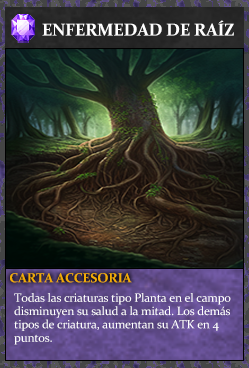
<style>
.page{position:relative;width:249px;height:368px}
.page>*{position:absolute;margin:0}
.t1{font:17.3px "Constantia-Bold";letter-spacing:-0.02em;color:#ffffff}
.t2{font:13.3px "Constantia-Bold";letter-spacing:-0.02em;color:#f2ac05}
.t3{font:12px/13.3px "Constantia";letter-spacing:-0.02em;color:#ffffff}
</style>
<div class="page">
<p class="t1" style="left:42px;top:20px;width:192px;height:16px">ENFERMEDAD DE RAÍZ</p>
<p class="t2" style="left:10px;top:273px;width:122px;height:10px">CARTA ACCESORIA</p>
<p class="t3" style="left:14px;top:293px;width:217px;height:52px">Todas las criaturas tipo Planta en el campo<br>disminuyen su salud a la mitad. Los demás<br>tipos de criatura, aumentan su ATK en 4<br>puntos.</p>
</div>
